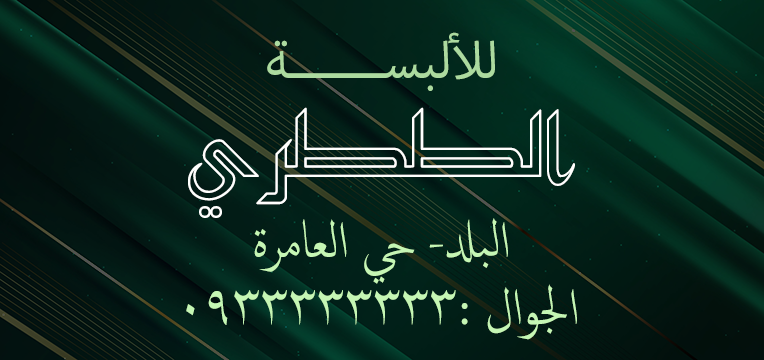
<style>
.page{position:relative;width:764px;height:360px}
.page>*{position:absolute;margin:0}
.t1{font:72px "MyriadArabic-Regular";color:#acda9f}
.t2{font:90px "KufiExtendedOutline";color:#fffffe}
.t3{font:72px "ArabicTypesetting";color:#c5f6b4}
</style>
<div class="page">
<p class="t1" style="left:267px;top:32px;width:228px;height:59px">للألبســـــــة</p>
<p class="t2" style="left:188px;top:107px;width:387px;height:111px">الططري</p>
<p class="t3" style="left:254px;top:218px;width:254px;height:66px">البلد- حي العامرة</p>
<p class="t3" style="left:186px;top:284px;width:391px;height:56px">الجوال :0933333333</p>
</div>
